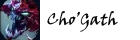
<style>
.page{position:relative;width:140px;height:40px;background:#ffffff}
.page>*{position:absolute;margin:0}
.t1{font:12px "VinerHandITC";color:#000000}
</style>
<div class="page">
<p class="t1" style="left:47px;top:11px;width:71px;height:21px">Cho’Gath</p>
</div>
